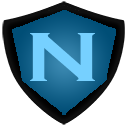
<style>
.page{position:relative;width:128px;height:128px;background:#ffffff}
.page>*{position:absolute;margin:0}
.t1{font:72px "CopperplateGothic-Bold";color:#76d0ff;scale:1.2 1}
</style>
<div class="page">
<p class="t1" style="left:30px;top:33px;width:65px;height:48px">N</p>
</div>
